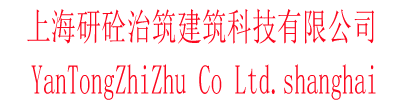
<style>
.page{position:relative;width:400px;height:100px;background:#ffffff}
.page>*{position:absolute;margin:0}
.t1{font:38px "SimSun";color:#fc071e;scale:0.66 1}
.t2{font:42px "SimSun";color:#fc071e;scale:0.57 1}
</style>
<div class="page">
<p class="t1" style="left:27px;top:8px;width:347px;height:36px">上海研砼治筑建筑科技有限公司</p>
<p class="t2" style="left:31px;top:64px;width:345px;height:36px">YanTongZhiZhu Co Ltd.shanghai</p>
</div>
